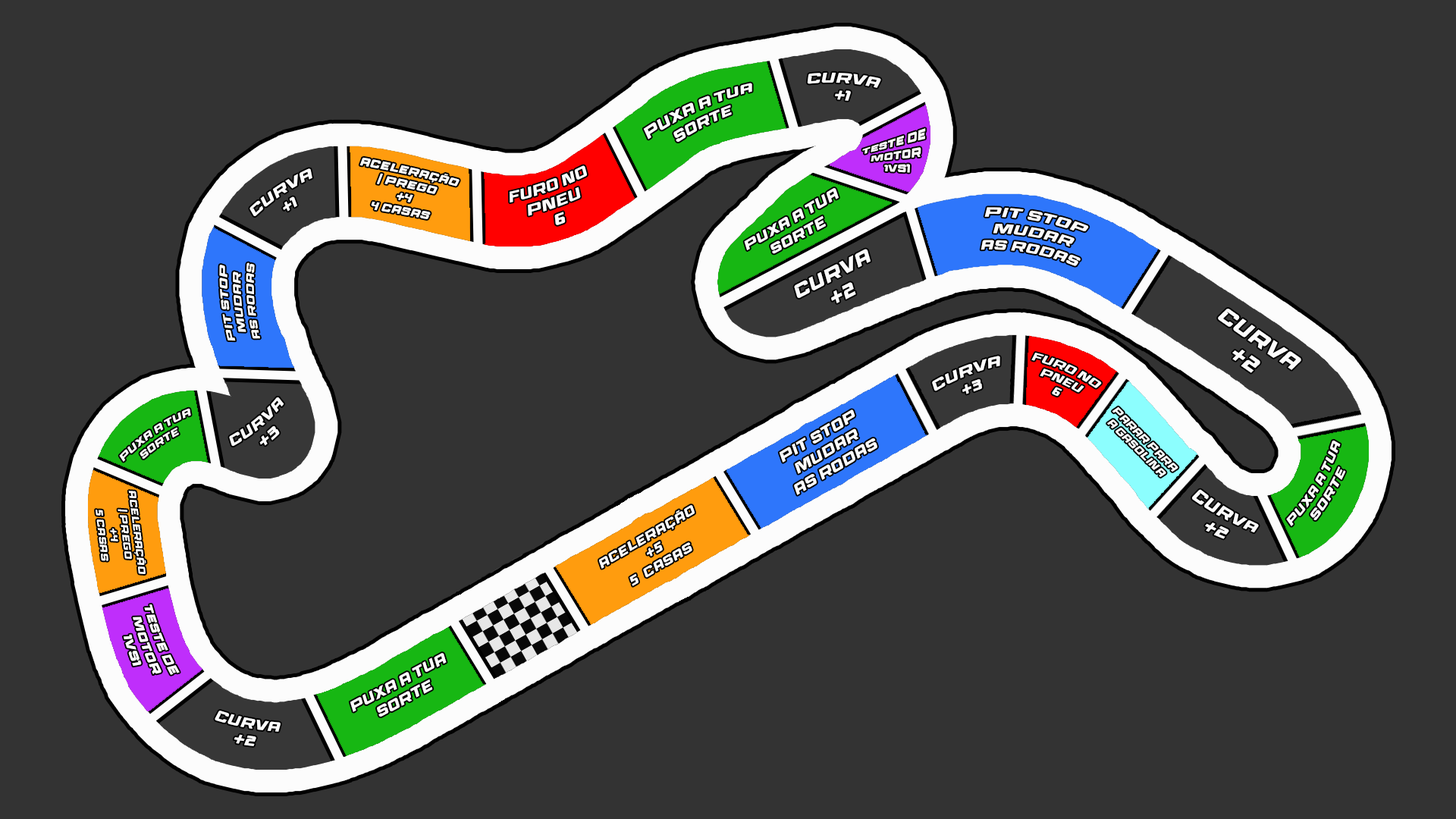
<style>
.page{position:relative;width:1456px;height:819px;background:#333333}
.page>*{position:absolute;margin:0}
.t1{font:14.4px "RaceSportRegular";color:#fcfcfc}
.t2{font:10.8px "RaceSportRegular";color:#fcfcfc}
.t3{font:11.2px "RaceSportRegular";color:#fcfcfc}
.t4{font:13.6px "RaceSportRegular";color:#fcfcfc}
.t5{font:19px "RaceSportRegular";color:#fcfcfc}
.t6{font:21.1px "RaceSportRegular";color:#fcfcfc}
.t7{font:10.2px "RaceSportRegular";color:#fcfcfc}
.t8{font:14.7px "RaceSportRegular";color:#fcfcfc}
.t9{font:10.1px "RaceSportRegular";color:#fcfcfc}
.t10{font:12.4px "RaceSportRegular";color:#fcfcfc}
.t11{font:9.8px "RaceSportRegular";color:#fcfcfc}
.t12{font:15.8px "RaceSportRegular";color:#fcfcfc}
.t13{font:12.8px "RaceSportRegular";color:#fcfcfc}
.t14{font:12.1px "RaceSportRegular";color:#fcfcfc}
</style>
<div class="page">
<p class="t1" style="left:807px;top:72px;width:74px;height:29px;text-align:center;rotate:4deg">Curva<br>+1</p>
<p class="t1" style="left:643px;top:83px;width:109px;height:59px;text-align:center;rotate:-25deg">puxa a tua<br>sorte</p>
<p class="t2" style="left:862px;top:128px;width:64px;height:45px;text-align:center;rotate:-7deg">Teste de<br>motor<br>1vs1</p>
<p class="t3" style="left:359px;top:157px;width:101px;height:62px;text-align:center;rotate:11deg">Aceleração<br>/ prego<br>+4<br>4 casas</p>
<p class="t1" style="left:249px;top:168px;width:63px;height:48px;text-align:center;rotate:-34deg">Curva<br>+1</p>
<p class="t1" style="left:509px;top:165px;width:78px;height:60px;text-align:center;rotate:-19deg">Furo no<br>pneu<br>6</p>
<p class="t1" style="left:744px;top:188px;width:95px;height:66px;text-align:center;rotate:-29deg">puxa a tua<br>sorte</p>
<p class="t4" style="left:981px;top:207px;width:108px;height:59px;text-align:center;rotate:10deg">PIT Stop<br>Mudar<br>as rodas</p>
<p class="t5" style="left:794px;top:249px;width:77px;height:54px;text-align:center;rotate:-27deg">Curva<br>+2</p>
<p class="t2" style="left:219px;top:262px;width:41px;height:79px;text-align:center;rotate:-95deg">PIT Stop<br>Mudar<br>as rodas</p>
<p class="t6" style="left:1218px;top:309px;width:83px;height:64px;text-align:center;rotate:35deg">Curva<br>+2</p>
<p class="t2" style="left:1031px;top:353px;width:71px;height:44px;text-align:center;rotate:24deg">Furo no<br>pneu<br>6</p>
<p class="t1" style="left:932px;top:356px;width:68px;height:38px;text-align:center;rotate:-21deg">Curva<br>+3</p>
<p class="t1" style="left:229px;top:397px;width:55px;height:49px;text-align:center;rotate:-40deg">Curva<br>+3</p>
<p class="t7" style="left:119px;top:408px;width:72px;height:54px;text-align:center;rotate:-34deg">puxa a tua<br>sorte</p>
<p class="t8" style="left:779px;top:409px;width:98px;height:86px;text-align:center;rotate:-31deg">PIT Stop<br>Mudar<br>as rodas</p>
<p class="t9" style="left:1107px;top:406px;width:71px;height:71px;text-align:center;rotate:45deg">Parar para<br>a gasolina</p>
<p class="t10" style="left:1286px;top:440px;width:60px;height:86px;text-align:center;rotate:-59deg">puxa a tua<br>sorte</p>
<p class="t11" style="left:96px;top:491px;width:50px;height:83px;text-align:center;rotate:83deg">Aceleração<br>/ prego<br>+4<br>5 casas</p>
<p class="t12" style="left:1192px;top:489px;width:67px;height:50px;text-align:center;rotate:27deg">Curva<br>+2</p>
<p class="t13" style="left:599px;top:505px;width:96px;height:81px;text-align:center;rotate:-30deg">Aceleração<br>+5<br>5  casas</p>
<p class="t14" style="left:123px;top:604px;width:57px;height:71px;text-align:center;rotate:70deg">Teste de<br>motor<br>1vs1</p>
<p class="t1" style="left:350px;top:653px;width:97px;height:64px;text-align:center;rotate:-28deg">puxa a tua<br>sorte</p>
<p class="t1" style="left:215px;top:711px;width:66px;height:35px;text-align:center;rotate:10deg">Curva<br>+2</p>
</div>
